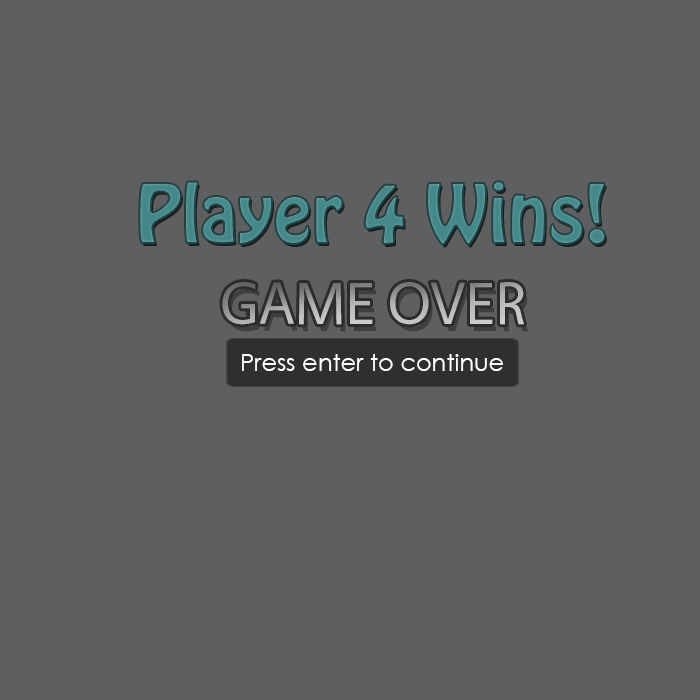
<style>
.page{position:relative;width:700px;height:700px;background:#5e5f61}
.page>*{position:absolute;margin:0}
.t1{font:72px "HoboStd";color:#438788}
.t2{font:60px "Vegur-Regular"}
.t3{font:24px "CenturyGothic";color:#ffffff}
</style>
<div class="page">
<p class="t1" style="left:139px;top:181px;width:466px;height:64px">Player 4 Wins!</p>
<p class="t2" style="left:222px;top:282px;width:302px;height:43px">GAME OVER</p>
<p class="t3" style="left:242px;top:354px;width:261px;height:17px">Press enter to continue</p>
</div>
